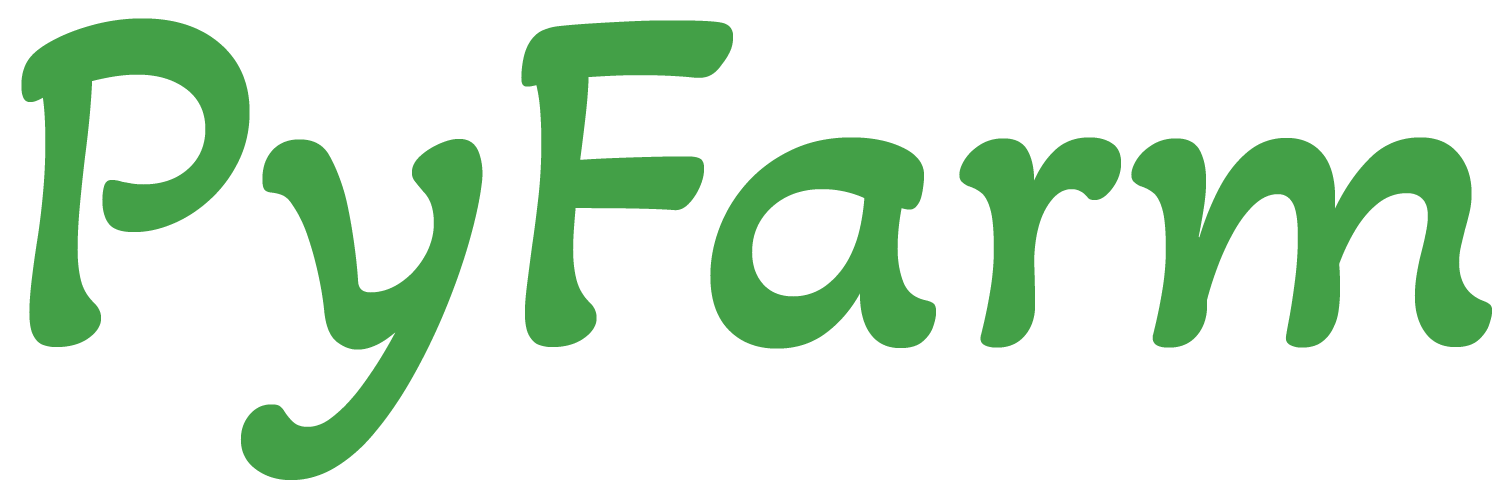
<style>
.page{position:relative;width:1505px;height:493px;background:#ffffff}
.page>*{position:absolute;margin:0}
.t1{font:500px "AkayaTelivigala-Regular";color:#43a047}
</style>
<div class="page">
<p class="t1" style="left:21px;top:18px;width:1471px;height:462px">PyFarm</p>
</div>
